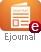
<style>
.page{position:relative;width:41px;height:52px;background:#ffffff}
.page>*{position:absolute;margin:0}
.t1{font:9px "MyriadPro-Regular";letter-spacing:-0.015em;color:#878787}
</style>
<div class="page">
<p class="t1" style="left:5px;top:33px;width:30px;height:9px">Ejournal</p>
</div>
